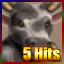
<style>
.page{position:relative;width:64px;height:64px}
.page>*{position:absolute;margin:0}
.t1{font:16px "Impact"}
</style>
<div class="page">
<p class="t1" style="left:23px;top:47px;width:37px;height:14px">5 Hits</p>
</div>
